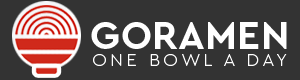
<style>
.page{position:relative;width:300px;height:80px;background:#333333}
.page>*{position:absolute;margin:0}
.t1{font:40px "CeraPro-Bold";letter-spacing:0.01em;color:#ffffff}
.t2{font:18px "CeraPro-Light";letter-spacing:0.2em;color:#ffffff}
</style>
<div class="page">
<p class="t1" style="left:91px;top:22px;width:196px;height:27px">GORAMEN</p>
<p class="t2" style="left:93px;top:54px;width:194px;height:12px">ONE BOWL A DAY</p>
</div>
